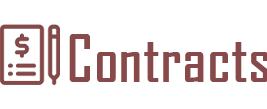
<style>
.page{position:relative;width:267px;height:109px;background:#ffffff}
.page>*{position:absolute;margin:0}
.t1{font:61px "AgencyFB-Reg";color:#874949;font-weight:bold}
</style>
<div class="page">
<p class="t1" style="left:69px;top:34px;width:200px;height:48px">Contracts</p>
</div>
